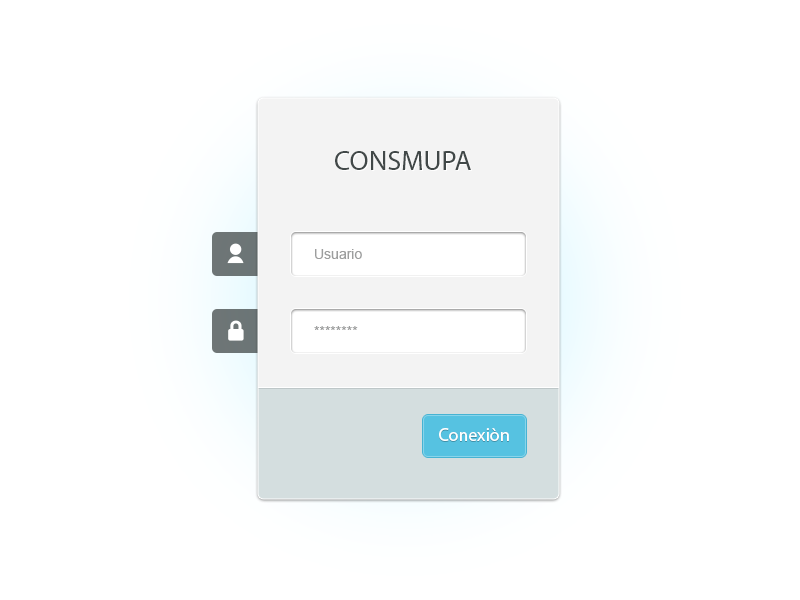
<style>
.page{position:relative;width:800px;height:600px;background:#ffffff}
.page>*{position:absolute;margin:0}
.t1{font:28px "MyriadPro-Regular";color:#414848}
.t2{font:14px "ArialMT";color:#9d9e9e}
.t3{font:18px "MyriadPro-Regular";color:#ffffff}
</style>
<div class="page">
<p class="t1" style="left:335px;top:151px;width:136px;height:19px">CONSMUPA</p>
<p class="t2" style="left:315px;top:249px;width:47px;height:10px">Usuario</p>
<p class="t2" style="left:314px;top:326px;width:44px;height:4px">********</p>
<p class="t3" style="left:439px;top:428px;width:70px;height:13px">Conexiòn</p>
</div>
